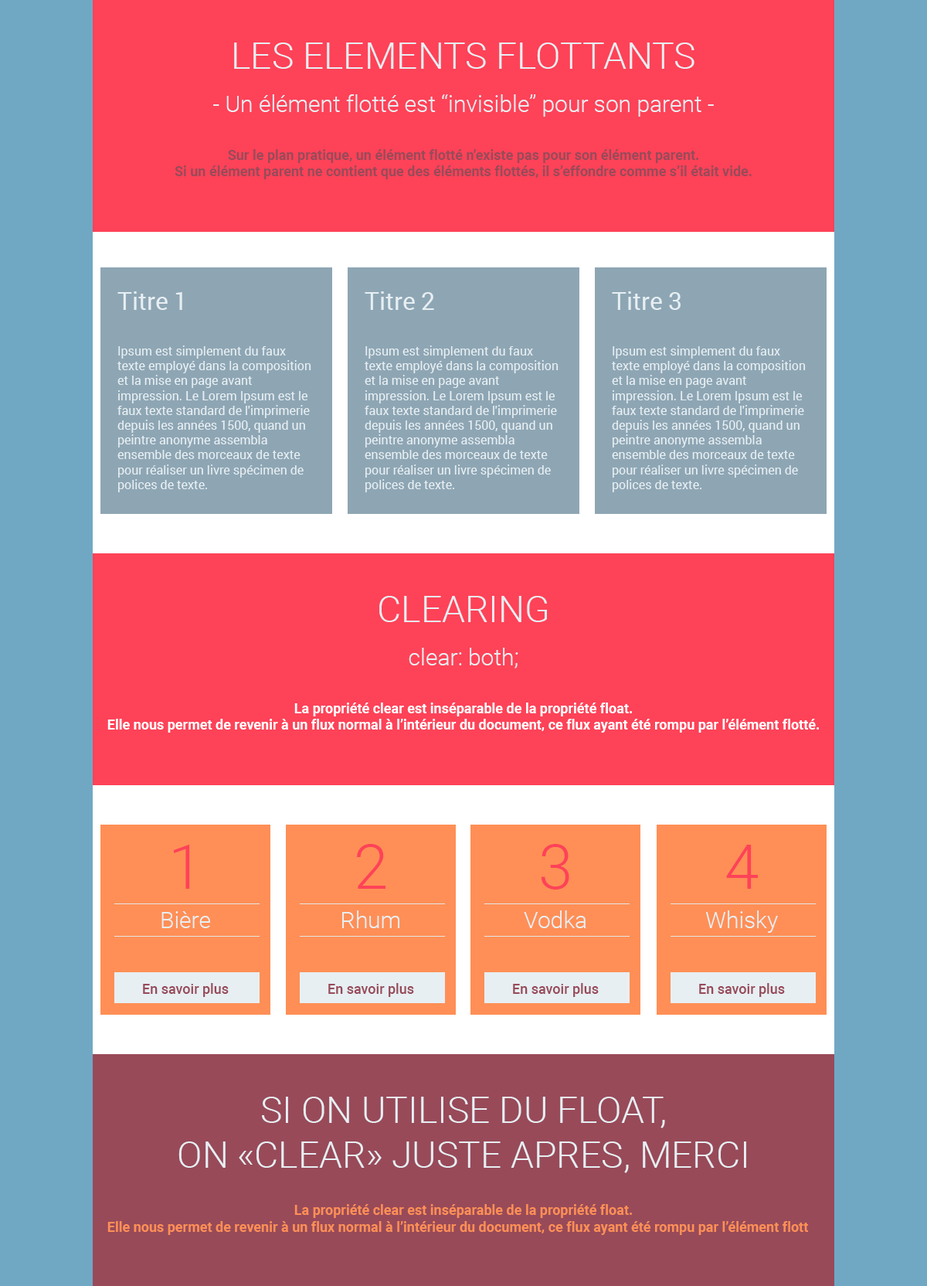
<style>
.page{position:relative;width:927px;height:1286px;background:#fe4258}
.page>*{position:absolute;margin:0}
.t1{font:13.9px "Roboto-Bold";color:#984a59}
.t2{font:37.1px "Roboto-Light";color:#e7eff3}
.t3{font:23.2px "Roboto-Light";color:#e7eff3}
.t4{font:12.4px "Roboto-Regular";color:#e7eff3}
.t5{font:24.7px "Roboto-Regular";color:#e7eff3}
.t6{font:13.9px "Roboto-Bold";color:#ffffff}
.t7{font:61.8px "Roboto-Light";color:#fe4258}
.t8{font:13.9px "Roboto-Medium";color:#984a59}
.t9{font:13.9px "Roboto-Bold";color:#ff8f56}
</style>
<div class="page">
<p class="t1" style="left:175px;top:43px;width:577px;height:136px;text-align:center"><span class="t2">LES ELEMENTS FLOTTANTS<br></span><span class="t3">- Un élément flotté est “invisible” pour son parent -<br></span>Sur le plan pratique, un élément flotté n’existe pas pour son élément parent.<br>Si un élément parent ne contient que des éléments flottés, il s’effondre comme s’il était vide.</p>
<p class="t4" style="left:117px;top:291px;width:194px;height:201px"><span class="t5">Titre 1<br></span>Ipsum est simplement du faux texte employé dans la composition et la mise en page avant impression. Le Lorem Ipsum est le faux texte standard de l'imprimerie depuis les années 1500, quand un peintre anonyme assembla ensemble des morceaux de texte pour réaliser un livre spécimen de polices de texte.</p>
<p class="t4" style="left:365px;top:291px;width:194px;height:201px"><span class="t5">Titre 2<br></span>Ipsum est simplement du faux texte employé dans la composition et la mise en page avant impression. Le Lorem Ipsum est le faux texte standard de l'imprimerie depuis les années 1500, quand un peintre anonyme assembla ensemble des morceaux de texte pour réaliser un livre spécimen de polices de texte.</p>
<p class="t4" style="left:612px;top:291px;width:194px;height:201px"><span class="t5">Titre 3<br></span>Ipsum est simplement du faux texte employé dans la composition et la mise en page avant impression. Le Lorem Ipsum est le faux texte standard de l'imprimerie depuis les années 1500, quand un peintre anonyme assembla ensemble des morceaux de texte pour réaliser un livre spécimen de polices de texte.</p>
<p class="t6" style="left:107px;top:596px;width:712px;height:137px;text-align:center"><span class="t2">CLEARING<br></span><span class="t3">clear: both; <br></span>La propriété clear est inséparable de la propriété float.<br>Elle nous permet de revenir à un flux normal à l’intérieur du document, ce flux ayant été rompu par l’élément flotté.</p>
<p class="t3" style="left:162px;top:845px;width:48px;height:83px;text-align:center"><span class="t7">1<br></span>Bière</p>
<p class="t3" style="left:342px;top:844px;width:58px;height:84px;text-align:center"><span class="t7">2<br></span>Rhum</p>
<p class="t3" style="left:524px;top:844px;width:63px;height:84px;text-align:center"><span class="t7">3<br></span>Vodka</p>
<p class="t3" style="left:706px;top:845px;width:72px;height:88px;text-align:center"><span class="t7">4<br></span>Whisky</p>
<p class="t8" style="left:143px;top:983px;width:86px;height:14px">En savoir plus</p>
<p class="t8" style="left:328px;top:983px;width:86px;height:14px">En savoir plus</p>
<p class="t8" style="left:513px;top:983px;width:86px;height:14px">En savoir plus</p>
<p class="t8" style="left:699px;top:983px;width:86px;height:14px">En savoir plus</p>
<p class="t9" style="left:107px;top:1097px;width:712px;height:138px;text-align:center"><span class="t2">SI ON UTILISE DU FLOAT,<br>ON «CLEAR» JUSTE APRES, MERCI<br></span>La propriété clear est inséparable de la propriété float.<br>Elle nous permet de revenir à un flux normal à l’intérieur du document, ce flux ayant été rompu par l’élément flott<span class="t1">é.</span></p>
</div>
